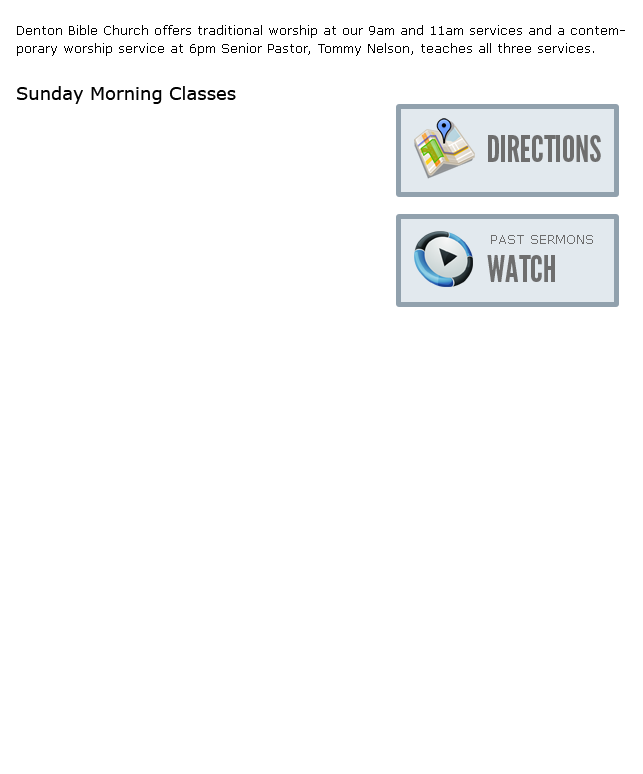
<style>
.page{position:relative;width:643px;height:774px;background:#ffffff}
.page>*{position:absolute;margin:0}
.t1{font:13px/18px "Verdana";color:#000000}
.t2{font:18px "Verdana";color:#000000}
.t3{font:36px "LeagueGothic";color:#6e6e6e;text-transform:uppercase}
.t4{font:13px "Verdana";color:#6e6e6e;text-transform:uppercase}
</style>
<div class="page">
<p class="t1" style="left:17px;top:25px;width:608px;height:31px">Denton Bible Church offers traditional worship at our 9am and 11am services and a contemporary worship service at 6pm Senior Pastor, Tommy Nelson, teaches all three services.</p>
<p class="t2" style="left:17px;top:86px;width:219px;height:18px">Sunday Morning Classes</p>
<p class="t3" style="left:488px;top:135px;width:113px;height:27px">Directions</p>
<p class="t4" style="left:491px;top:235px;width:102px;height:9px">past Sermons</p>
<p class="t3" style="left:487px;top:255px;width:68px;height:27px">Watch</p>
</div>
